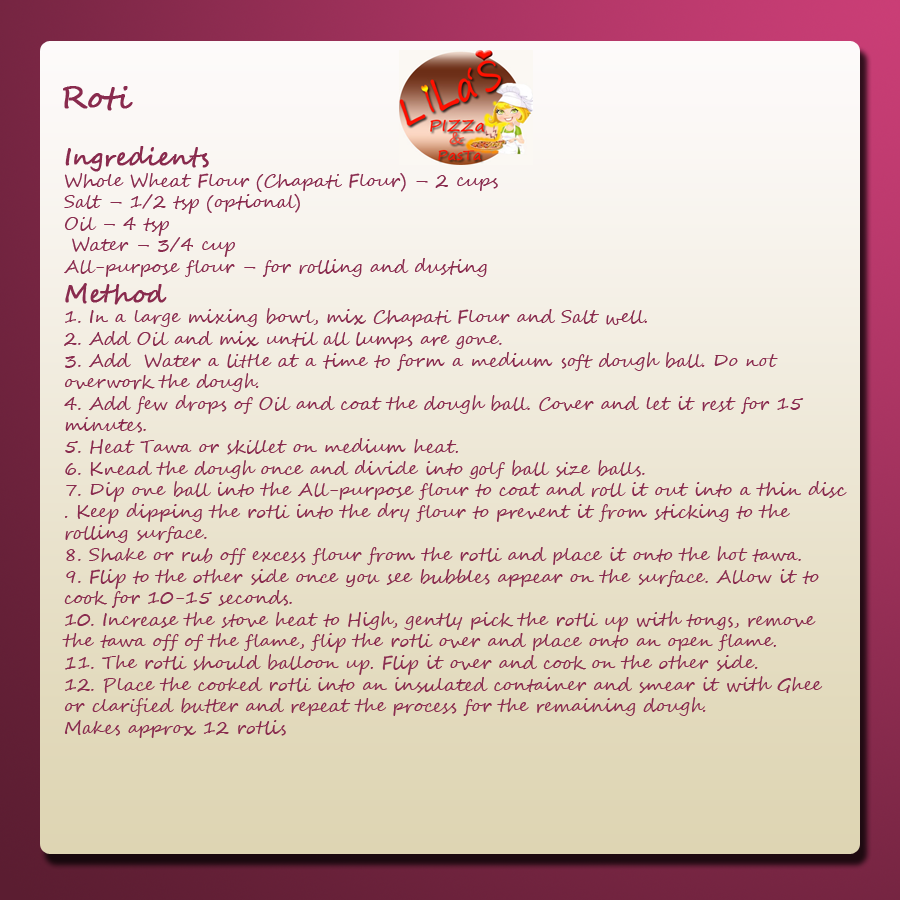
<style>
.page{position:relative;width:900px;height:900px}
.page>*{position:absolute;margin:0}
.t1{font:30px "SegoeScript";color:#892b4e;font-weight:bold}
.t2{font:18px "SegoeScript";color:#892b4e}
.t3{font:24px "SegoeScript";color:#892b4e;font-weight:bold}
</style>
<div class="page">
<p class="t1" style="left:63px;top:86px;width:70px;height:25px">Roti</p>
<p class="t2" style="left:62px;top:146px;width:785px;height:592px"><span class="t3">Ingredients<br></span>Whole Wheat Flour (Chapati Flour) – 2 cups<br>Salt – 1/2 tsp (optional)<br>Oil – 4 tsp<br> Water – 3/4 cup<br>All-purpose flour – for rolling and dusting<br><span class="t3">Method<br></span>1. In a large mixing bowl, mix Chapati Flour and Salt well.<br>2. Add Oil and mix until all lumps are gone.<br>3. Add  Water a little at a time to form a medium soft dough ball. Do not <br>overwork the dough.<br>4. Add few drops of Oil and coat the dough ball. Cover and let it rest for 15 <br>minutes.<br>5. Heat Tawa or skillet on medium heat.<br>6. Knead the dough once and divide into golf ball size balls.<br>7. Dip one ball into the All-purpose flour to coat and roll it out into a thin disc<br>. Keep dipping the rotli into the dry flour to prevent it from sticking to the <br>rolling surface.<br>8. Shake or rub off excess flour from the rotli and place it onto the hot tawa.<br>9. Flip to the other side once you see bubbles appear on the surface. Allow it to <br>cook for 10-15 seconds.<br>10. Increase the stove heat to High, gently pick the rotli up with tongs, remove <br>the tawa off of the flame, flip the rotli over and place onto an open flame.<br>11. The rotli should balloon up. Flip it over and cook on the other side.<br>12. Place the cooked rotli into an insulated container and smear it with Ghee <br>or clarified butter and repeat the process for the remaining dough.<br>Makes approx 12 rotlis</p>
</div>
